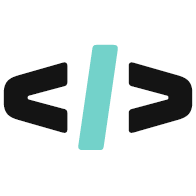
<style>
.page{position:relative;width:196px;height:196px;background:#ffffff}
.page>*{position:absolute;margin:0}
.t1{font:116.7px "Bungee-Regular";color:#141414}
.t2{font:116.7px "Bungee-Regular";color:#73d2ca}
</style>
<div class="page">
<p class="t1" style="left:3px;top:44px;width:190px;height:106px">&lt;<span class="t2">/</span>&gt;</p>
</div>
